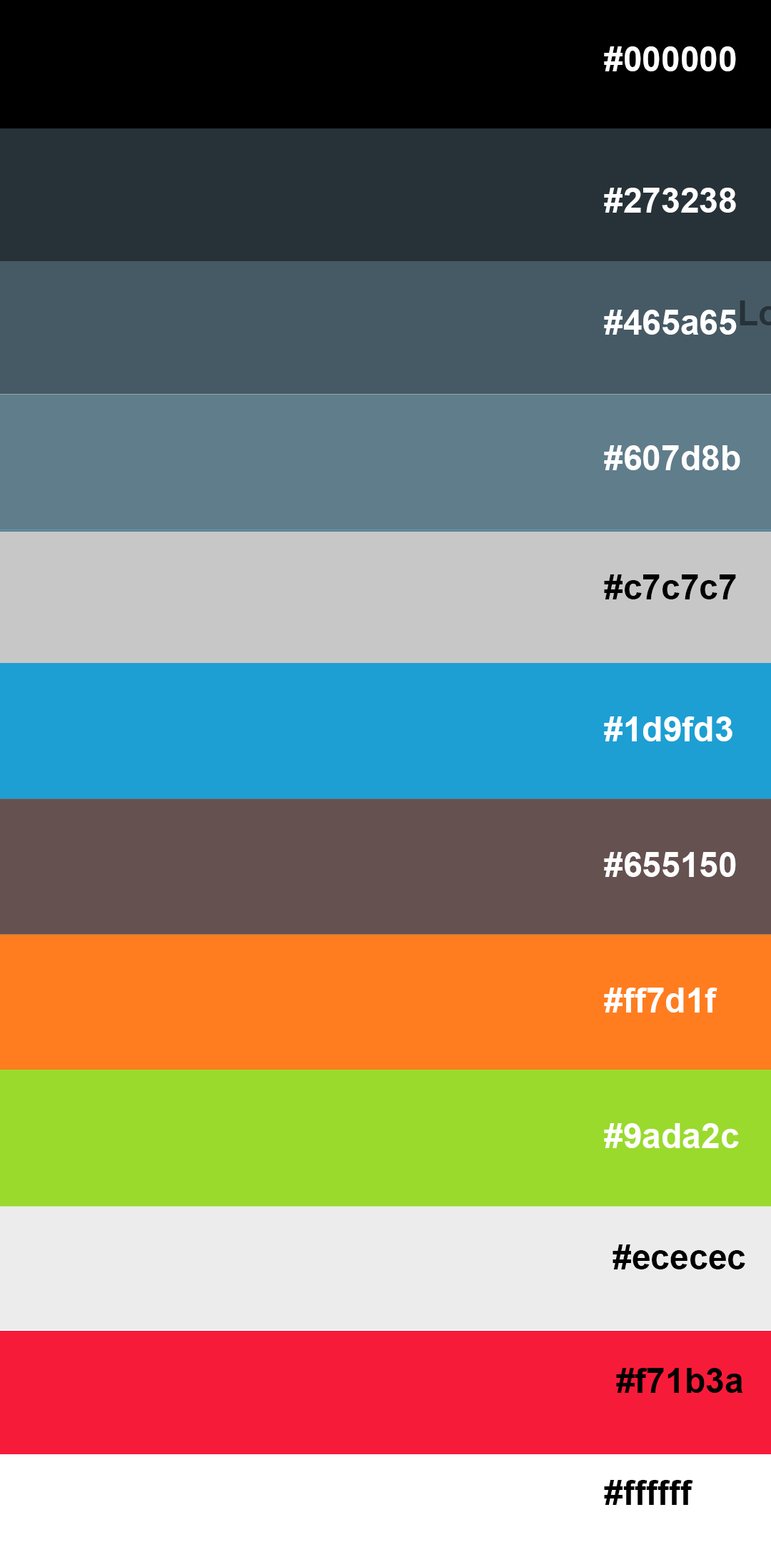
<style>
.page{position:relative;width:771px;height:1547px}
.page>*{position:absolute;margin:0}
.t1{font:34.3px "Arial-BoldMT";color:#ffffff}
.t2{font:34.3px "Arial-BoldMT";color:#000000}
</style>
<div class="page">
<p class="t1" style="left:604px;top:46px;width:132px;height:25px">#000000</p>
<p class="t1" style="left:604px;top:188px;width:132px;height:25px">#273238</p>
<p class="t1" style="left:604px;top:310px;width:132px;height:25px">#465a65</p>
<p class="t1" style="left:604px;top:445px;width:136px;height:25px">#607d8b</p>
<p class="t2" style="left:604px;top:574px;width:132px;height:25px">#c7c7c7</p>
<p class="t1" style="left:604px;top:716px;width:128px;height:25px">#1d9fd3</p>
<p class="t1" style="left:604px;top:852px;width:132px;height:25px">#655150</p>
<p class="t1" style="left:604px;top:988px;width:113px;height:25px">#ff7d1f</p>
<p class="t1" style="left:604px;top:1123px;width:135px;height:25px">#9ada2c</p>
<p class="t2" style="left:612px;top:1245px;width:133px;height:25px">#ececec</p>
<p class="t2" style="left:616px;top:1368px;width:127px;height:25px">#f71b3a</p>
<p class="t2" style="left:604px;top:1480px;width:89px;height:25px">#ffffff</p>
</div>
